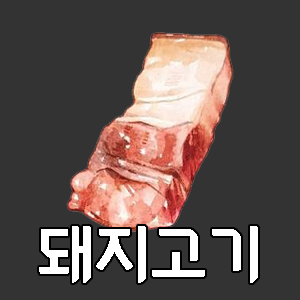
<style>
.page{position:relative;width:300px;height:300px;background:#333333}
.page>*{position:absolute;margin:0}
.t1{font:61.4px "wemakeprice-bold";color:#ffffff}
</style>
<div class="page">
<p class="t1" style="left:39px;top:226px;width:219px;height:57px">돼지고기</p>
</div>
